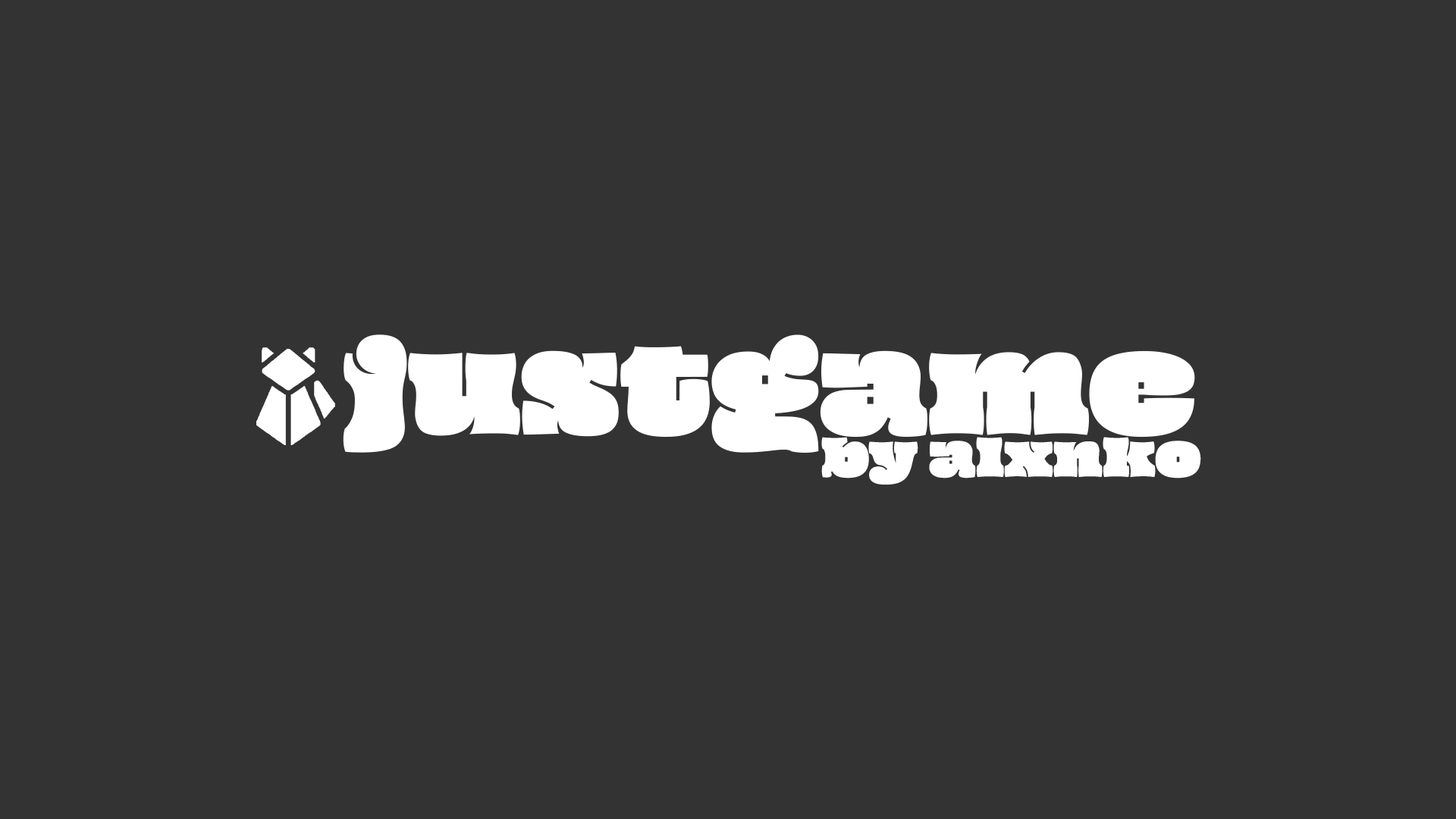
<style>
.page{position:relative;width:1456px;height:819px;background:#333333}
.page>*{position:absolute;margin:0}
.t1{font:112.2px "Oi-Regular";color:#ffffff}
.t2{font:48.5px "Oi-Regular";color:#ffffff}
</style>
<div class="page">
<p class="t1" style="left:343px;top:334px;width:852px;height:119px">justgame</p>
<p class="t2" style="left:821px;top:437px;width:380px;height:48px">by alxnko</p>
</div>
